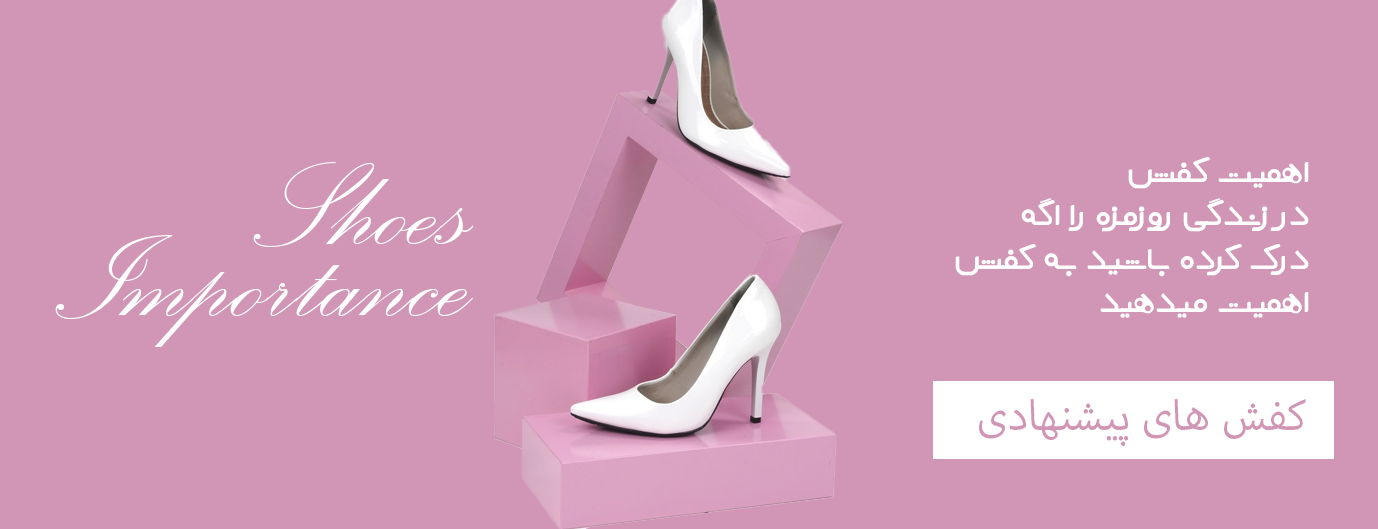
<style>
.page{position:relative;width:1378px;height:529px;background:#d195b5}
.page>*{position:absolute;margin:0}
.t1{font:36px "AGhasem";color:#ffffff;text-transform:uppercase}
.t2{font:150px/72px "PalaceScriptMT";color:#ffffff}
.t3{font:60px "MyriadArabic-Regular";color:#d195b5;text-transform:uppercase}
</style>
<div class="page">
<p class="t1" style="left:955px;top:157px;width:354px;height:161px">اهمیت کفش<br>در زندگی روزمزه را اگه <br>درک کرده باشید به کفش <br>اهمیت میدهید</p>
<p class="t2" style="left:55px;top:162px;width:419px;height:185px">Shoes<br>Importance</p>
<p class="t3" style="left:979px;top:399px;width:327px;height:47px">کفش های پیشنهادی</p>
</div>
